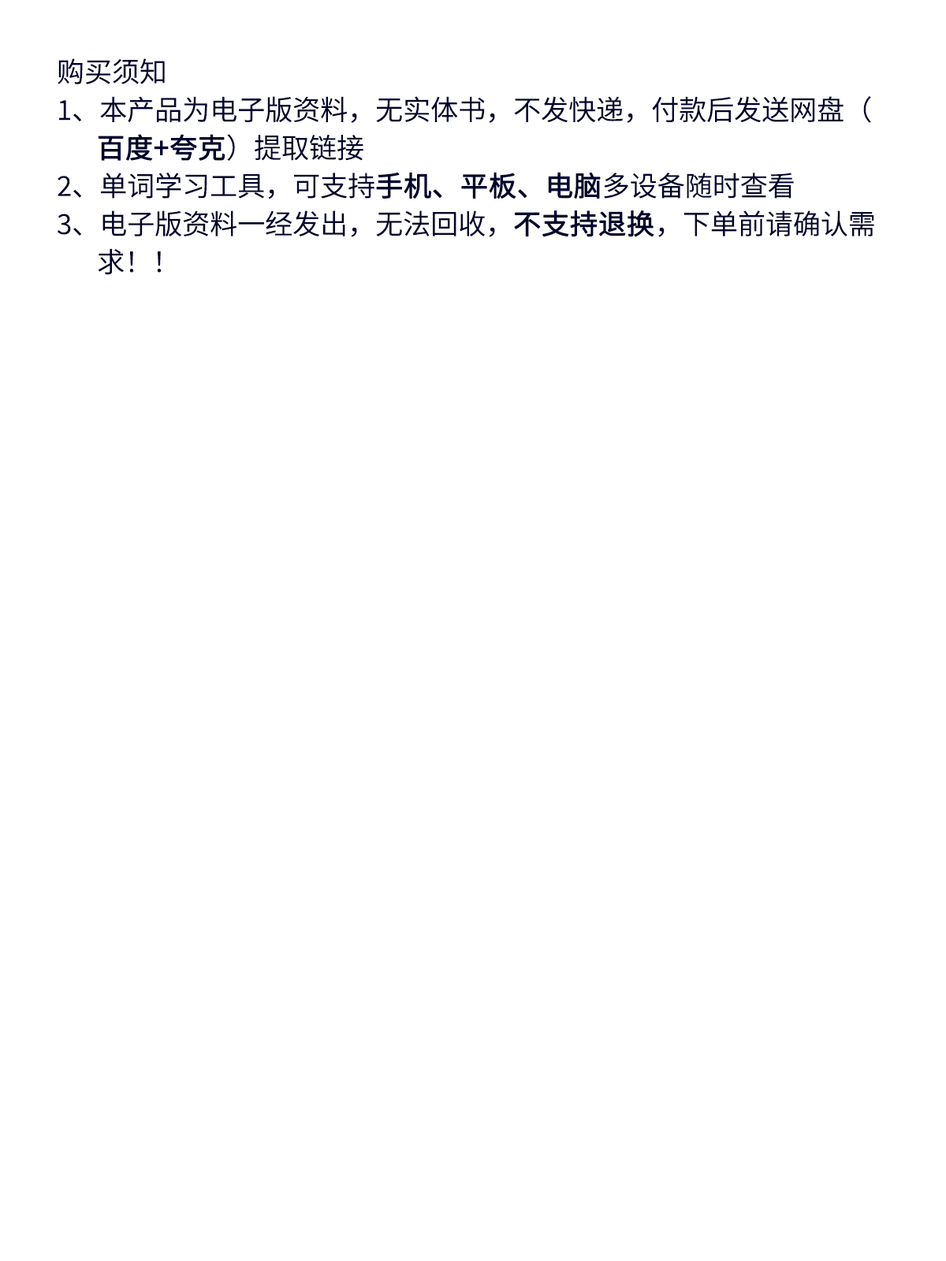
<style>
.page{position:relative;width:946px;height:1261px;background:#ffffff}
.page>*{position:absolute;margin:0}
.t1{font:27.6px/38px "SourceHanSansSC-Normal";color:#00022d}
.t2{font:27.6px/38px "SourceHanSansSC-Normal";color:#00022d;font-weight:bold}
</style>
<div class="page">
<p class="t1" style="left:58px;top:58px;width:816px;height:217px">购买须知<br>1、本产品为电子版资料，无实体书，不发快递，付款后发送网盘（<span class="t2">百度+夸克</span>）提取链接<br>2、单词学习工具，可支持<span class="t2">手机、平板、电脑</span>多设备随时查看<br>3、电子版资料一经发出，无法回收，<span class="t2">不支持退换</span>，下单前请确认需求！！</p>
</div>
